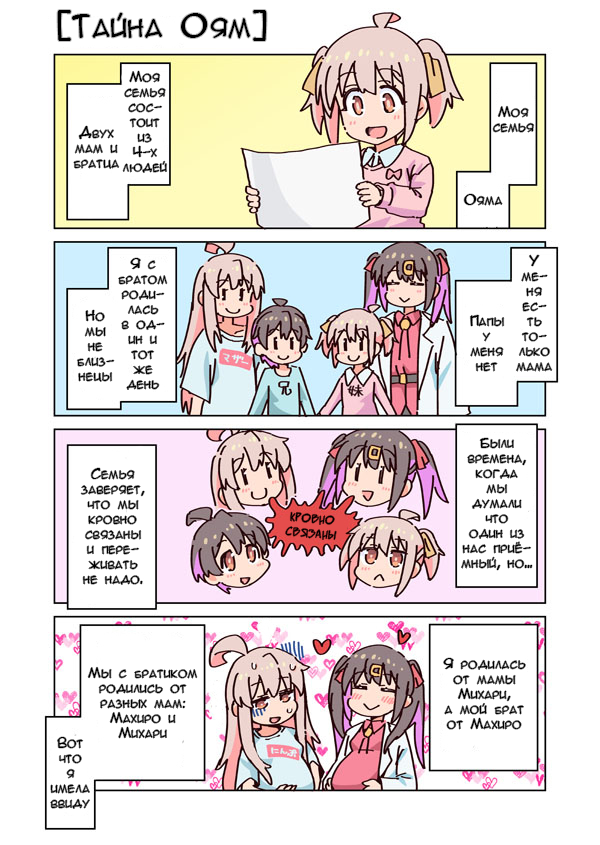
<style>
.page{position:relative;width:600px;height:845px;background:#ffffff}
.page>*{position:absolute;margin:0}
.t1{font:29.2px "AnimeAcev3";color:#000000}
.t2{font:12.5px "AnimeAcev3";color:#000000}
.t3{font:12.5px "SuperWebcomicBros.Rusbyyakustick";color:#000000}
</style>
<div class="page">
<p class="t1" style="left:57px;top:10px;width:210px;height:31px">[Тайна Оям]</p>
<p class="t2" style="left:123px;top:71px;width:44px;height:102px;text-align:center">Моя<br>семья<br>сос-<br>тоит<br>из<br>4-х<br>людей</p>
<p class="t2" style="left:493px;top:106px;width:41px;height:27px;text-align:center">Моя<br>семья</p>
<p class="t2" style="left:73px;top:126px;width:46px;height:43px;text-align:center">Двух<br>мам и<br>братца</p>
<p class="t2" style="left:464px;top:194px;width:39px;height:12px">Ояма</p>
<p class="t2" style="left:516px;top:255px;width:36px;height:117px;text-align:center">У<br>ме-<br>ня<br>ес-<br>ть<br>то-<br>лько<br>мама</p>
<p class="t2" style="left:118px;top:258px;width:49px;height:132px;text-align:center">Я с<br>братом<br>роди-<br>лась<br>в од-<br>ин и<br>тот<br>же<br>день</p>
<p class="t2" style="left:77px;top:310px;width:37px;height:72px;text-align:center">Но<br>мы<br>не<br>близ-<br>нецы</p>
<p class="t2" style="left:470px;top:315px;width:34px;height:57px;text-align:center">Папы<br>у<br>меня<br>нет</p>
<p class="t2" style="left:461px;top:438px;width:71px;height:132px;text-align:center">Были<br>времена,<br>когда<br>мы<br>думали<br>что<br>один из<br>нас приё-<br>мный, но...</p>
<p class="t2" style="left:81px;top:468px;width:64px;height:117px;text-align:center">Семья<br>заверяет,<br>что мы<br>кровно<br>связаны<br>и пере-<br>живать<br>не надо.</p>
<p class="t3" style="left:285px;top:512px;width:52px;height:28px;text-align:center;rotate:5deg">Кровно<br>связаны</p>
<p class="t2" style="left:443px;top:658px;width:83px;height:72px;text-align:center">Я родилась<br>от мамы<br>Михари,<br>а мой брат<br>от Махиро</p>
<p class="t2" style="left:88px;top:667px;width:109px;height:72px;text-align:center">Мы с братиком<br>родились от<br>разных мам:<br>Махиро и<br>Михари</p>
<p class="t2" style="left:50px;top:737px;width:40px;height:72px;text-align:center">Вот<br>что<br>я<br>имела<br>ввиду</p>
</div>
